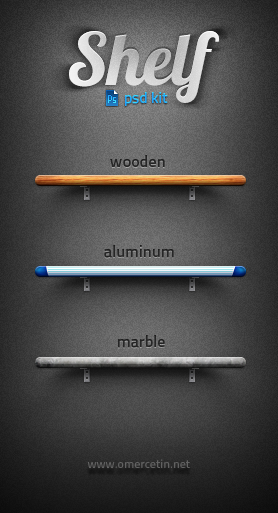
<style>
.page{position:relative;width:278px;height:513px}
.page>*{position:absolute;margin:0}
.t1{font:72px "Lobster1.4";color:#d7d7d7}
.t2{font:15px "TitilliumText14L-600wt";color:#22a4ff}
.t3{font:16px "TitilliumText14L-600wt";color:#2d2d2d}
.t4{font:12px "TitilliumText14L-600wt";color:#626262}
</style>
<div class="page">
<p class="t1" style="left:69px;top:31px;width:150px;height:72px">Shelf</p>
<p class="t2" style="left:125px;top:92px;width:43px;height:14px">psd kit</p>
<p class="t3" style="left:110px;top:155px;width:55px;height:12px">wooden</p>
<p class="t3" style="left:104px;top:245px;width:70px;height:13px">aluminum</p>
<p class="t3" style="left:118px;top:335px;width:47px;height:13px">marble</p>
<p class="t4" style="left:87px;top:459px;width:103px;height:9px">www.omercetin.net</p>
</div>
